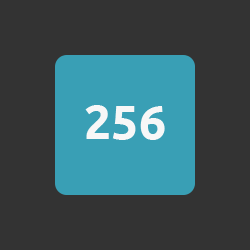
<style>
.page{position:relative;width:250px;height:250px;background:#333333}
.page>*{position:absolute;margin:0}
.t1{font:48px "Ubuntu-Bold";color:#f7f7f7}
</style>
<div class="page">
<p class="t1" style="left:85px;top:105px;width:80px;height:35px">256</p>
</div>
